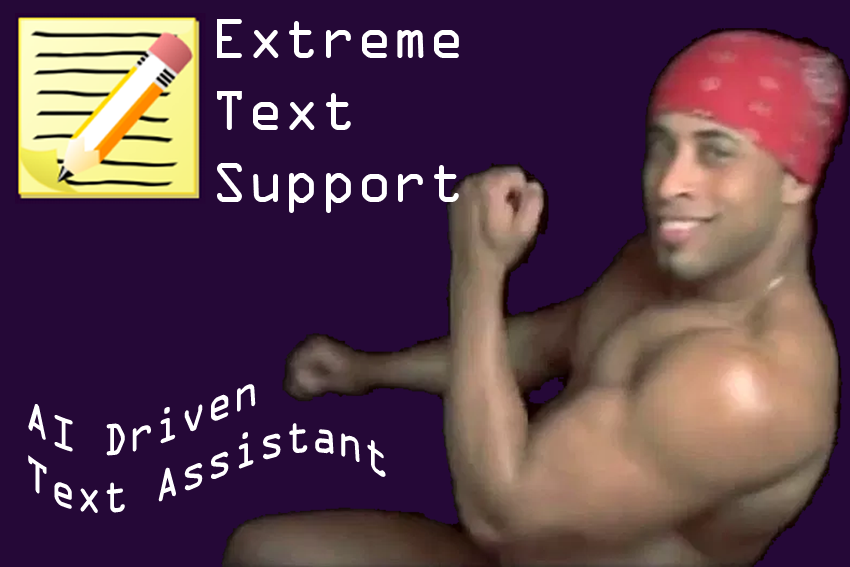
<style>
.page{position:relative;width:850px;height:567px;background:#250837}
.page>*{position:absolute;margin:0}
.t1{font:60px "OCRAExtended";color:#ffffff}
.t2{font:48px "OCRAExtended";color:#ffffff;scale:0.9 1}
</style>
<div class="page">
<p class="t1" style="left:217px;top:19px;width:242px;height:194px">Extreme <br>Text <br>Support</p>
<p class="t2" style="left:28px;top:384px;width:358px;height:129px">AI Driven <br>Text Assistant</p>
</div>
